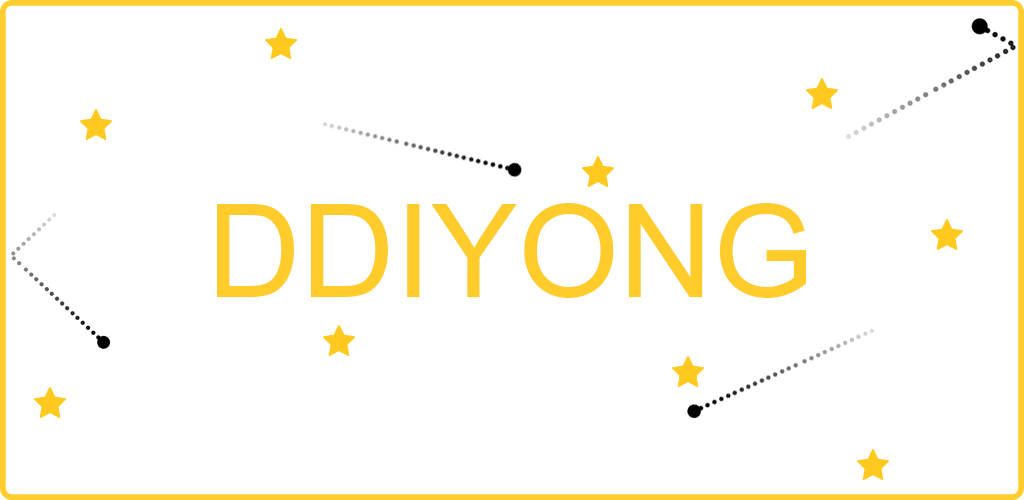
<style>
.page{position:relative;width:1024px;height:500px;background:#ffffff}
.page>*{position:absolute;margin:0}
.t1{font:130.1px "ArialMT";color:#ffcc2c}
</style>
<div class="page">
<p class="t1" style="left:217px;top:203px;width:589px;height:95px">DDIYONG</p>
</div>
